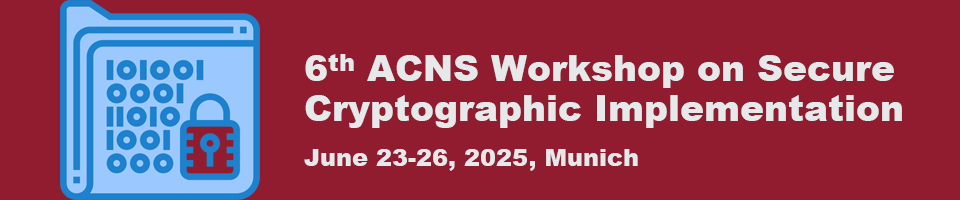
<style>
.page{position:relative;width:960px;height:200px;background:#911c2f}
.page>*{position:absolute;margin:0}
.t1{font:36px/55px "Arial-Black";color:#e7e8ea}
.t2{font:36px/40px "Arial-Black";color:#e7e8ea}
.t3{font:24px/40px "Arial-Black";color:#e7e8ea}
.t4{font:24px/55px "Arial-Black";color:#e7e8ea}
</style>
<div class="page">
<p class="t1" style="left:304px;top:54px;width:598px;height:117px"><span class="t2">6</span><span class="t3">th</span><span class="t2"> ACNS Workshop on Secure<br></span>Cryptographic Implementation<br><span class="t4">June 23-26, 2025, Munich</span></p>
</div>
